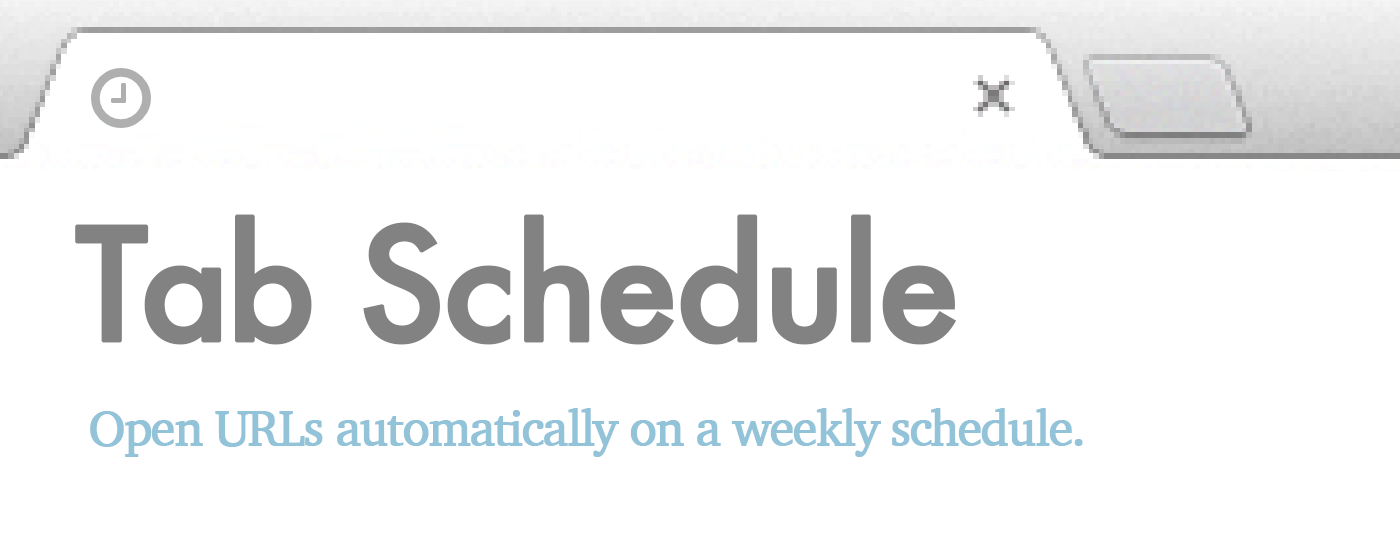
<style>
.page{position:relative;width:1400px;height:560px;background:#ffffff}
.page>*{position:absolute;margin:0}
.t1{font:151.8px "Futura-Medium";letter-spacing:-0.05em;color:#828282;font-weight:bold}
.t2{font:50px "Charter-Roman";letter-spacing:-0.05em;color:#92c3d8;font-weight:bold}
</style>
<div class="page">
<p class="t1" style="left:75px;top:214px;width:882px;height:131px">Tab Schedule</p>
<p class="t2" style="left:90px;top:408px;width:993px;height:49px">Open URLs automatically on a weekly schedule.</p>
</div>
